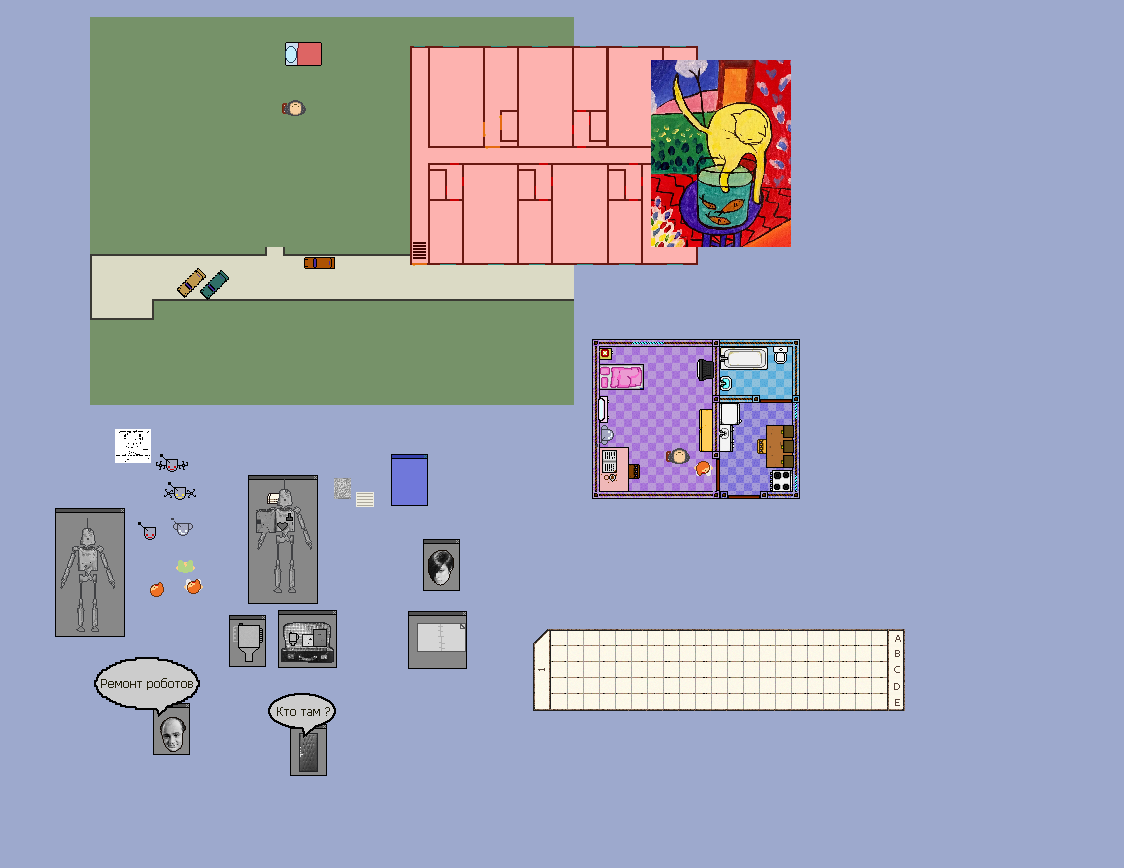
<style>
.page{position:relative;width:1124px;height:868px;background:#9da9cd}
.page>*{position:absolute;margin:0}
.t1{font:10px "Tahoma";color:#564238}
.t2{font:10px "Tahoma";color:#554137}
.t3{font:12px "Tahoma";color:#211e0a}
.t4{font:10.1px "Tahoma";color:#564238}
.t5{font:12px "Tahoma";color:#1e1b09}
</style>
<div class="page">
<p class="t1" style="left:895px;top:635px;width:6px;height:7px">A</p>
<p class="t2" style="left:895px;top:650px;width:5px;height:7px">B</p>
<p class="t3" style="left:101px;top:678px;width:92px;height:12px">Ремонт роботов</p>
<p class="t4" style="left:538px;top:668px;width:7px;height:3px;rotate:-90deg">1</p>
<p class="t2" style="left:894px;top:666px;width:6px;height:7px">C</p>
<p class="t2" style="left:894px;top:683px;width:6px;height:7px">D</p>
<p class="t2" style="left:895px;top:699px;width:5px;height:7px">E</p>
<p class="t5" style="left:277px;top:707px;width:53px;height:9px">Кто там ?</p>
</div>
